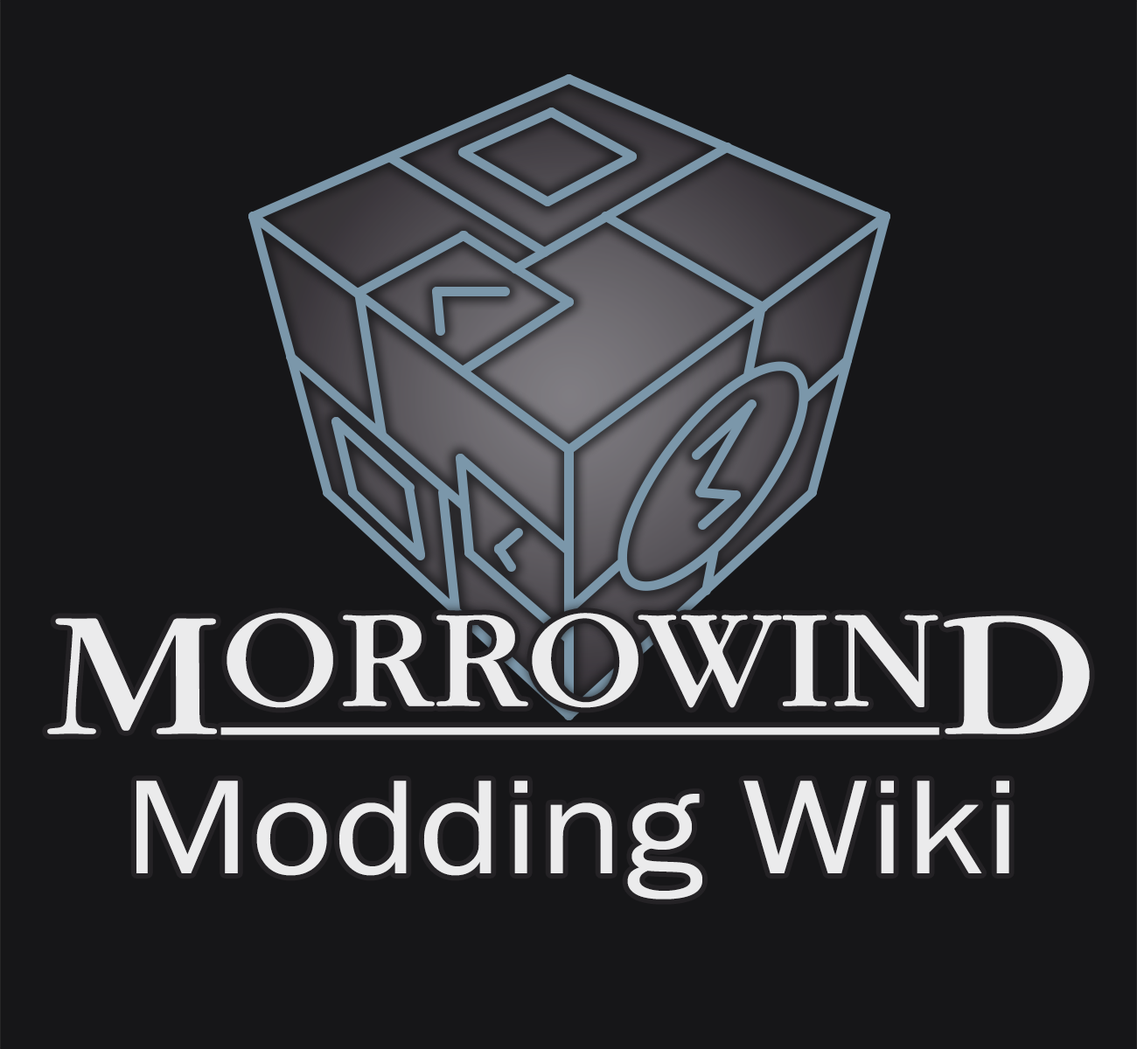
<style>
.page{position:relative;width:1137px;height:1049px;background:#161618}
.page>*{position:absolute;margin:0}
.t1{font:138.5px/139.9px "FranklinGothic-Book";color:#ebebec;scale:1.14 1}
.t2{font:184.6px/139.9px "ITCGaramondStd-Bk";color:#ebebec;scale:1.14 1}
.t3{font:144.8px/139.9px "ITCGaramondStd-Bk";color:#ebebec;text-decoration:underline;scale:1.03 1}
</style>
<div class="page">
<p class="t1" style="left:47px;top:613px;width:1042px;height:287px;text-align:center"><span class="t2">M</span><span class="t3">ORROWIN</span><span class="t2">D<br></span>Modding Wiki</p>
</div>
